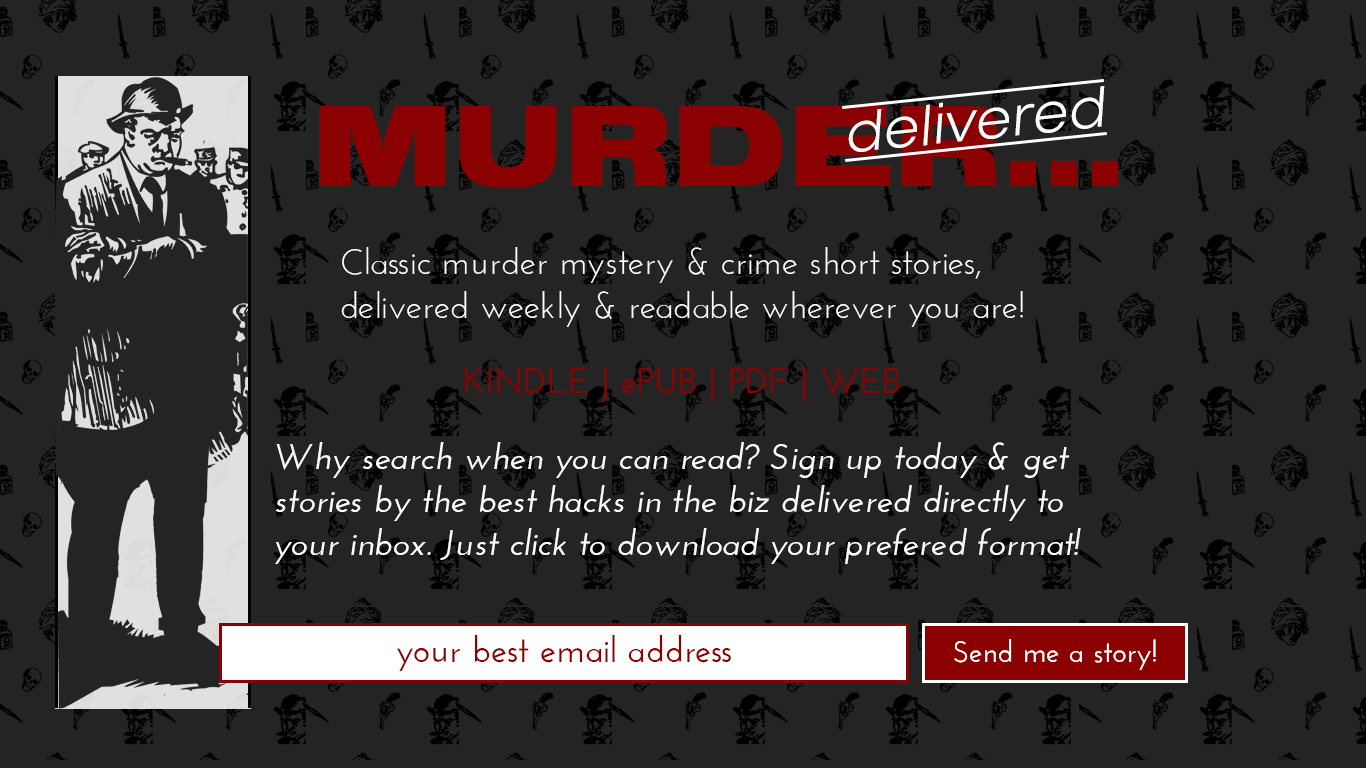
<style>
.page{position:relative;width:1366px;height:768px;background:#242424}
.page>*{position:absolute;margin:0}
.t1{font:60px "NimbusSanExt-Lig";color:#ffffff;font-style:italic}
.t2{font:120px "NimbusSanExt-Bla";color:#8b0000;text-transform:uppercase}
.t3{font:36px "JosefinSans";color:#ffffff}
.t4{font:36px "JosefinSans-SemiBold";color:#8b0000}
.t5{font:36px "JosefinSans-SemiBoldItalic";color:#ffffff}
.t6{font:30px "JosefinSans-SemiBold";color:#ffffff}
</style>
<div class="page">
<p class="t1" style="left:848px;top:86px;width:257px;height:66px;rotate:-6deg">delivered</p>
<p class="t2" style="left:319px;top:105px;width:799px;height:84px">Murder...</p>
<p class="t3" style="left:341px;top:247px;width:682px;height:80px">Classic murder mystery &amp; crime short stories,<br>delivered weekly &amp; readable wherever you are!</p>
<p class="t4" style="left:465px;top:367px;width:435px;height:34px">KINDLE | ePUB | PDF | WEB</p>
<p class="t5" style="left:275px;top:442px;width:806px;height:122px">Why search when you can read? Sign up today &amp; get<br>stories by the best hacks in the biz delivered directly to<br>your inbox. Just click to download your prefered format!</p>
<p class="t4" style="left:397px;top:635px;width:334px;height:36px">your best email address</p>
<p class="t6" style="left:954px;top:639px;width:202px;height:31px">Send me a story!</p>
</div>
